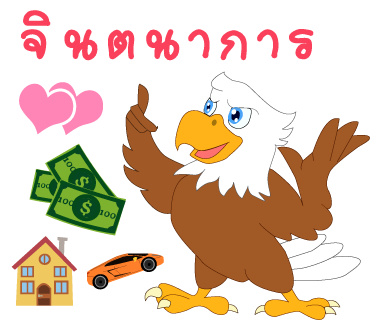
<style>
.page{position:relative;width:370px;height:320px;background:#ffffff}
.page>*{position:absolute;margin:0}
.t1{font:84px "2005_iannnnnMTV";letter-spacing:0.075em;color:#fa405a;scale:1.06 1}
</style>
<div class="page">
<p class="t1" style="left:20px;top:10px;width:294px;height:51px">จินตนาการ</p>
</div>
